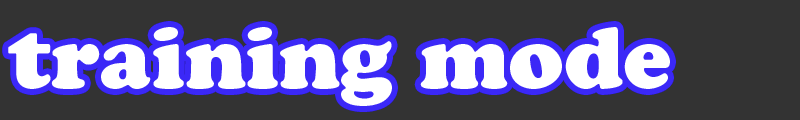
<style>
.page{position:relative;width:800px;height:120px;background:#333333}
.page>*{position:absolute;margin:0}
.t1{font:87px "CooperBlackStd";color:#ffffff}
</style>
<div class="page">
<p class="t1" style="left:8px;top:27px;width:662px;height:79px">training mode</p>
<p class="t1" style="left:8px;top:27px;width:662px;height:79px">training mode</p>
</div>
